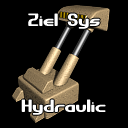
<style>
.page{position:relative;width:128px;height:128px;background:#000000}
.page>*{position:absolute;margin:0}
.t1{font:18px "GravitateBRK";color:#ffffff}
</style>
<div class="page">
<p class="t1" style="left:28px;top:13px;width:72px;height:16px">Ziel Sys</p>
<p class="t1" style="left:21px;top:99px;width:85px;height:16px">Hydraulic</p>
</div>
